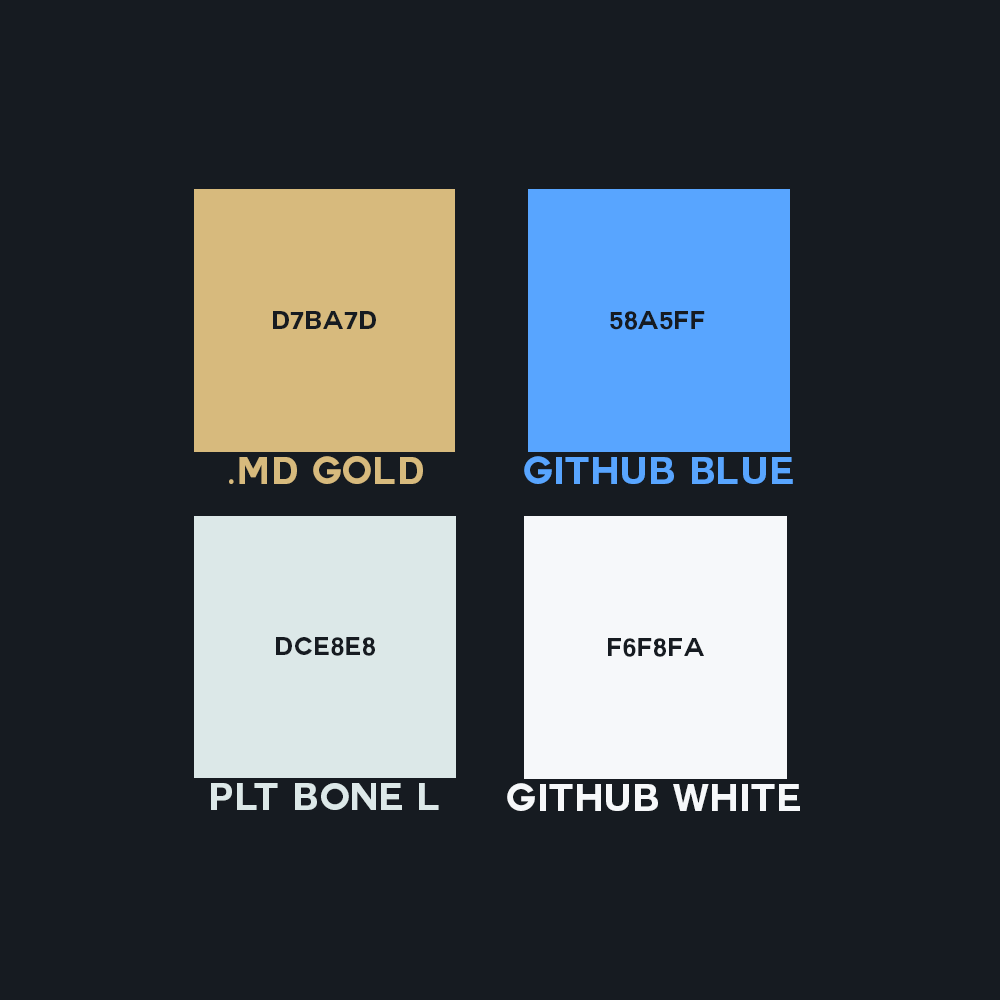
<style>
.page{position:relative;width:1000px;height:1000px;background:#161b21}
.page>*{position:absolute;margin:0}
.t1{font:25px "Couture-Bold";letter-spacing:0.03em;color:#161b21}
.t2{font:37.7px "Couture-Bold";letter-spacing:0.03em;color:#d7ba7d}
.t3{font:37.7px "MyriadPro-Regular";letter-spacing:0.03em;color:#d7ba7d}
.t4{font:37.7px "Couture-Bold";letter-spacing:0.03em;color:#58a5ff}
.t5{font:37.6px "Couture-Bold";letter-spacing:0.03em}
.t6{font:37.6px "Couture-Bold";letter-spacing:0.03em;color:#dce8e8}
.t7{font:37.7px "Couture-Bold";letter-spacing:0.03em;color:#f6f8fa}
</style>
<div class="page">
<p class="t1" style="left:273px;top:311px;width:103px;height:18px">d7ba7d</p>
<p class="t1" style="left:273px;top:311px;width:103px;height:18px">d7ba7d</p>
<p class="t1" style="left:610px;top:311px;width:95px;height:19px">58a5ff</p>
<p class="t1" style="left:610px;top:311px;width:95px;height:19px">58a5ff</p>
<p class="t2" style="left:229px;top:456px;width:194px;height:28px"><span class="t3">.</span>Md Gold</p>
<p class="t4" style="left:524px;top:456px;width:269px;height:28px">Github Blue</p>
<p class="t4" style="left:524px;top:456px;width:269px;height:28px">Github Blue</p>
<p class="t1" style="left:276px;top:637px;width:99px;height:19px">dce8e8</p>
<p class="t1" style="left:608px;top:638px;width:96px;height:19px">f6f8fa</p>
<p class="t5" style="left:208px;top:783px;width:232px;height:27px">PLT Bone D</p>
<p class="t6" style="left:211px;top:783px;width:228px;height:27px">PLT Bone L</p>
<p class="t7" style="left:507px;top:783px;width:293px;height:28px">Github White</p>
</div>
